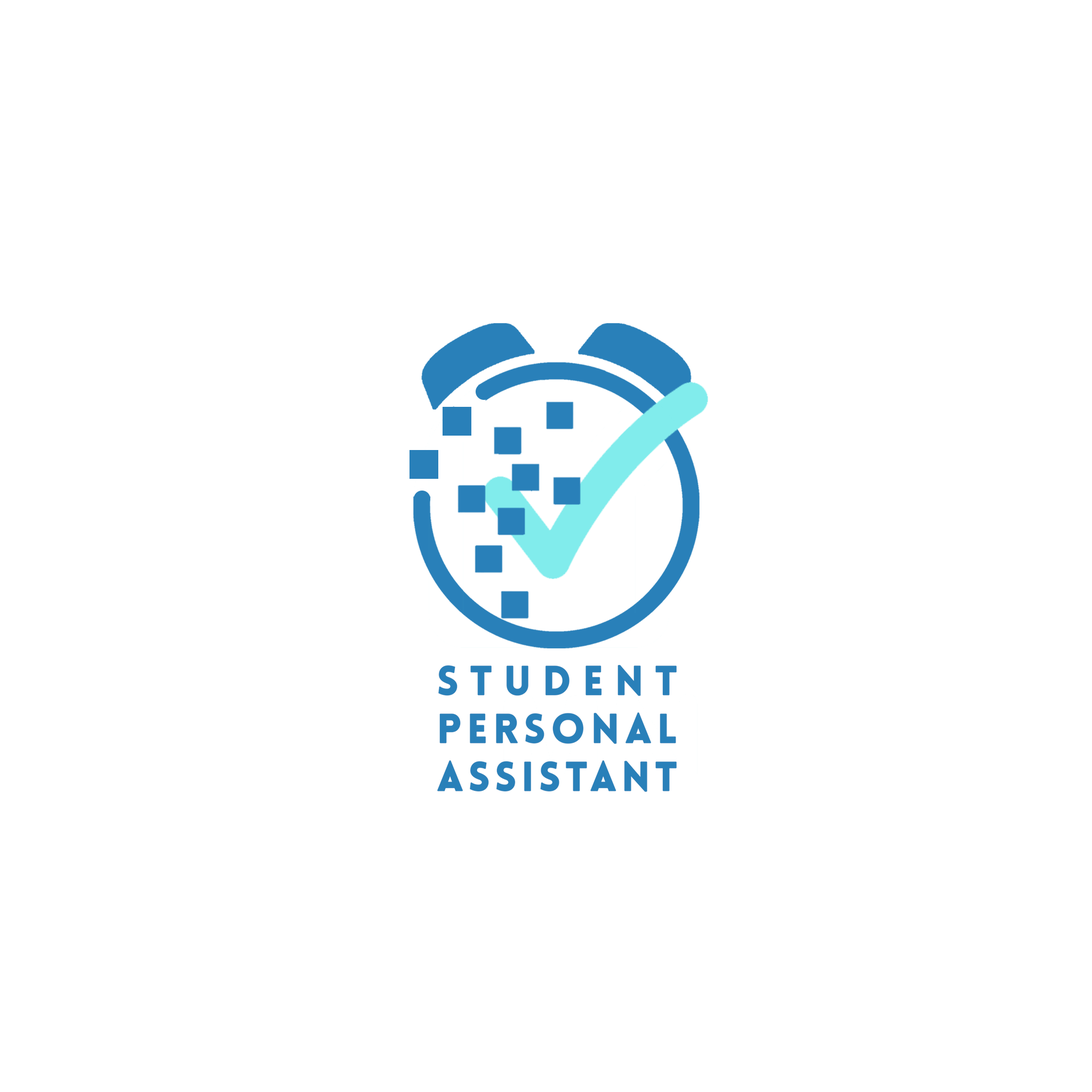
<style>
.page{position:relative;width:1092px;height:1092px;background:#ffffff}
.page>*{position:absolute;margin:0}
.t1{font:40px "LoveloBlack";letter-spacing:-0.02em;color:#2980b9;font-weight:bold}
</style>
<div class="page">
<p class="t1" style="left:437px;top:665px;width:240px;height:127px;text-align:justify">STUDENT PERSONAL ASSISTANT</p>
</div>
